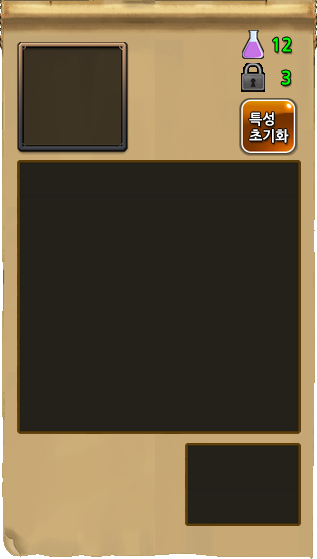
<style>
.page{position:relative;width:317px;height:559px;background:#232119}
.page>*{position:absolute;margin:0}
.t1{font:18px "NanumGothicBold";color:#00ff00}
.t2{font:14px "NanumGothicBold";color:#ffffff}
</style>
<div class="page">
<p class="t1" style="left:273px;top:37px;width:18px;height:15px">12</p>
<p class="t1" style="left:281px;top:70px;width:10px;height:15px">3</p>
<p class="t2" style="left:249px;top:112px;width:40px;height:31px">특성 <br>초기화</p>
</div>
